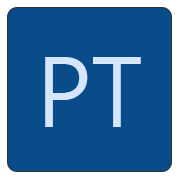
<style>
.page{position:relative;width:180px;height:180px;background:#084c8a}
.page>*{position:absolute;margin:0}
.t1{font:91.7px "MicrosoftJhengHeiUIRegular";color:#d6e6fc}
</style>
<div class="page">
<p class="t1" style="left:45px;top:57px;width:96px;height:70px">PT</p>
</div>
